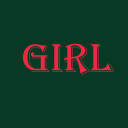
<style>
.page{position:relative;width:128px;height:128px;background:#073925}
.page>*{position:absolute;margin:0}
.t1{font:41.7px "Algerian";color:#ec2943}
</style>
<div class="page">
<p class="t1" style="left:23px;top:43px;width:91px;height:32px">Girl</p>
</div>
